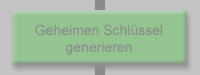
<style>
.page{position:relative;width:200px;height:75px;background:#94c591}
.page>*{position:absolute;margin:0}
.t1{font:14px "ArialMT";color:#8b898b}
</style>
<div class="page">
<p class="t1" style="left:35px;top:24px;width:127px;height:31px;text-align:center">Geheimen Schlüssel<br>generieren</p>
</div>
